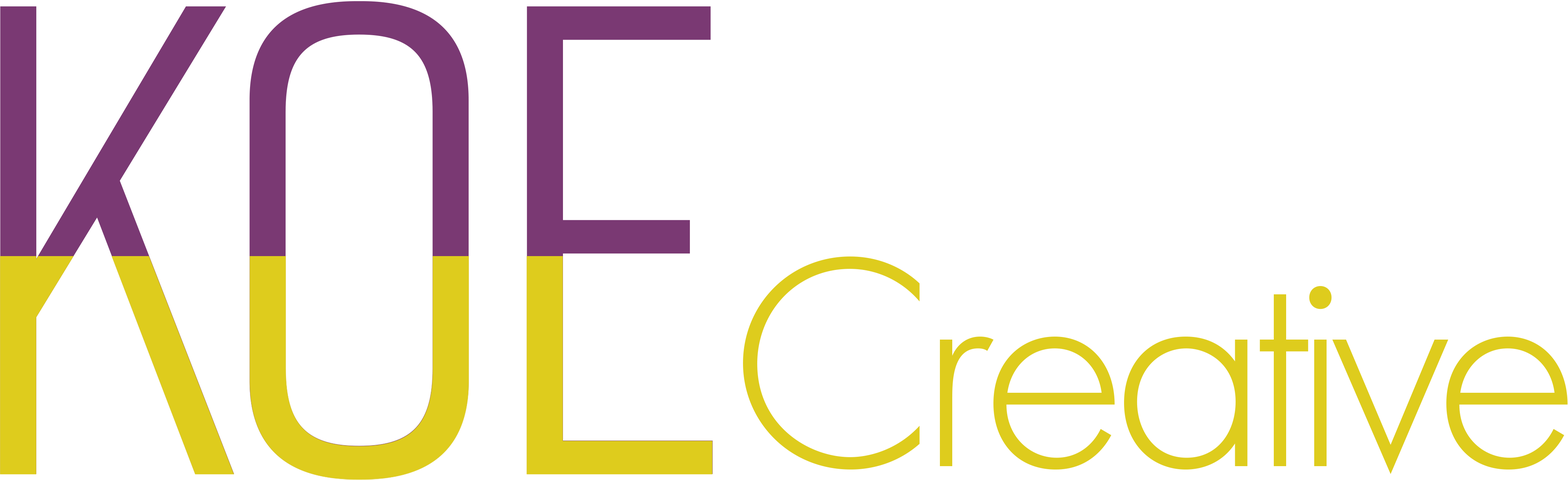
<style>
.page{position:relative;width:1568px;height:480px;background:#ffffff}
.page>*{position:absolute;margin:0}
.t1{font:668px "Rift-Regular";letter-spacing:-0.04em}
.t2{font:309.8px "FuturaPT-Light";letter-spacing:-0.06em;color:#decc1d}
</style>
<div class="page">
<p class="t1" style="left:0px;top:1px;width:713px;height:478px">Koe</p>
<p class="t2" style="left:743px;top:256px;width:825px;height:218px">Creative</p>
</div>
